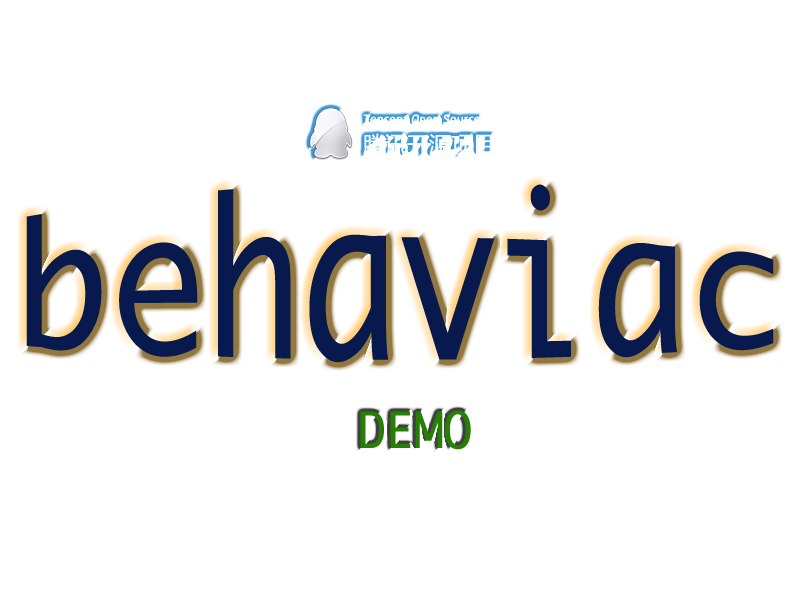
<style>
.page{position:relative;width:800px;height:600px;background:#ffffff}
.page>*{position:absolute;margin:0}
.t1{font:160px "Monaco";color:#081a4d}
.t2{font:48px "Monaco";color:#278004}
</style>
<div class="page">
<p class="t1" style="left:26px;top:184px;width:748px;height:179px">behaviac</p>
<p class="t2" style="left:360px;top:410px;width:111px;height:40px">DEMO</p>
</div>
